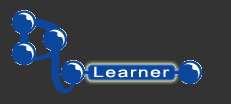
<style>
.page{position:relative;width:231px;height:104px;background:#333333}
.page>*{position:absolute;margin:0}
.t1{font:72.8px "Aries";letter-spacing:0.105em;color:#0b479d;scale:0.95 1}
.t2{font:14px "ArialMT";letter-spacing:0.105em;color:#ffffff;scale:1.39 1}
</style>
<div class="page">
<p class="t1" style="left:51px;top:47px;width:25px;height:47px">L</p>
<p class="t2" style="left:94px;top:66px;width:76px;height:12px">Learner</p>
</div>
